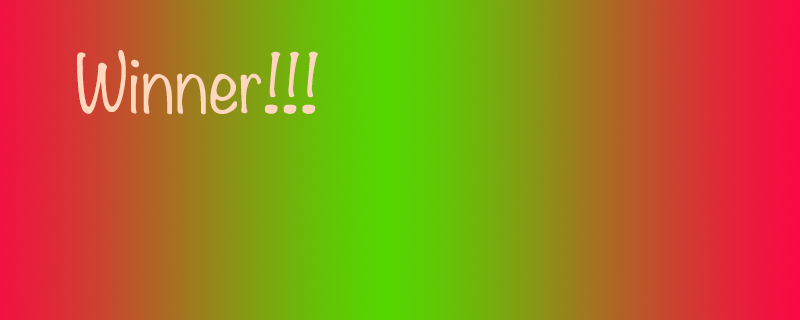
<style>
.page{position:relative;width:800px;height:320px}
.page>*{position:absolute;margin:0}
.t1{font:72px "Noteworthy-Light";color:#ffd7bd}
</style>
<div class="page">
<p class="t1" style="left:77px;top:50px;width:241px;height:65px">Winner!!!</p>
</div>
